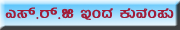
<style>
.page{position:relative;width:180px;height:30px}
.page>*{position:absolute;margin:0}
.t1{font:20px "Kuvempu_Eng_0005";color:#a11d39}
</style>
<div class="page">
<p class="t1" style="left:5px;top:7px;width:169px;height:13px">J¸ï.gï.f EAzÀ PÀÄªÉA¥ÀÄ</p>
</div>
